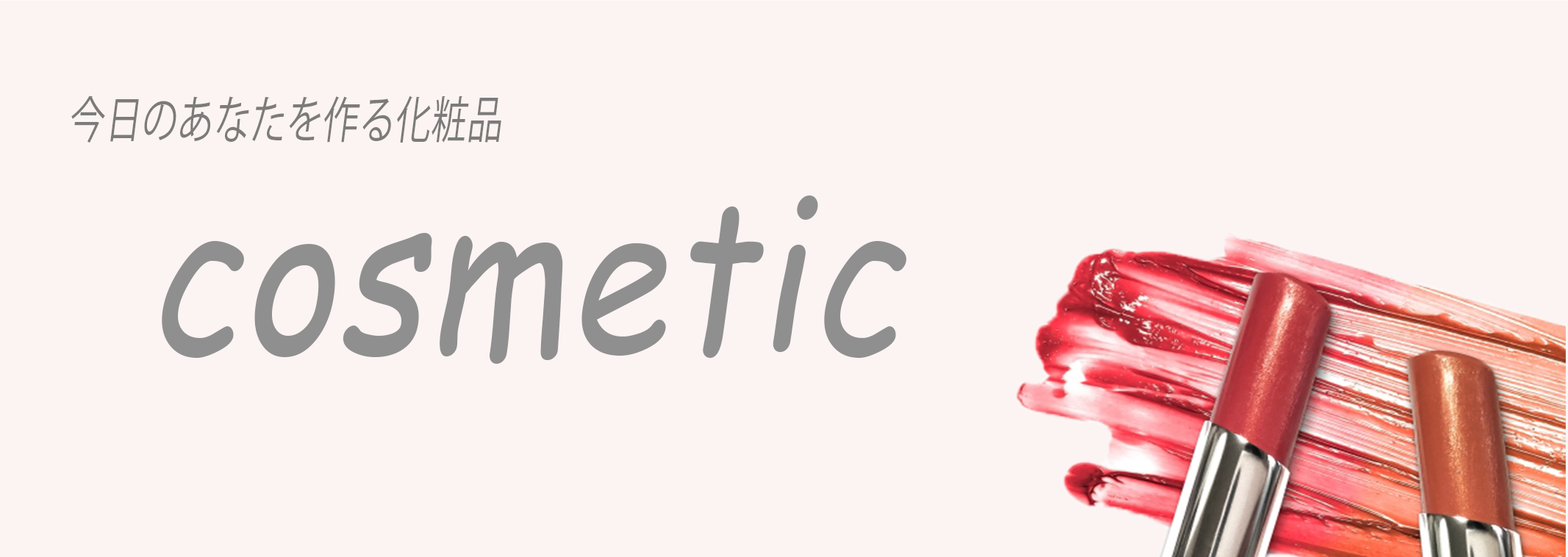
<style>
.page{position:relative;width:1568px;height:557px;background:#fcf4f3}
.page>*{position:absolute;margin:0}
.t1{font:49.9px "KozGoPr6N-Regular";letter-spacing:0.02em;color:#7c7b79;font-style:italic;scale:0.71 1}
.t2{font:212.4px "ComicSansMS";letter-spacing:0.02em;color:#8f8f8f;font-style:italic;scale:0.83 1}
</style>
<div class="page">
<p class="t1" style="left:71px;top:96px;width:430px;height:47px">今日のあなたを作る化粧品</p>
<p class="t2" style="left:162px;top:196px;width:744px;height:168px">cosmetic</p>
</div>
